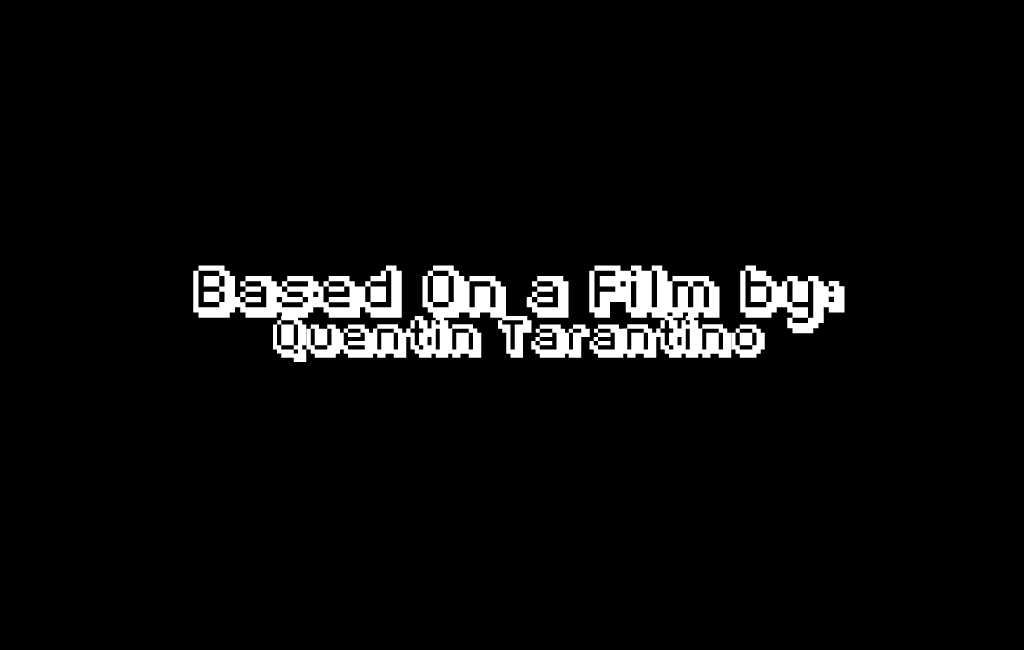
<style>
.page{position:relative;width:1024px;height:650px;background:#000000}
.page>*{position:absolute;margin:0}
.t1{font:41.7px "Fipps-Regular";color:#ffffff}
.t2{font:33.3px "Fipps-Regular";color:#ffffff}
</style>
<div class="page">
<p class="t1" style="left:193px;top:265px;width:652px;height:97px;text-align:center">Based On a Film by:<br><span class="t2">Quentin Tarantino</span></p>
</div>
